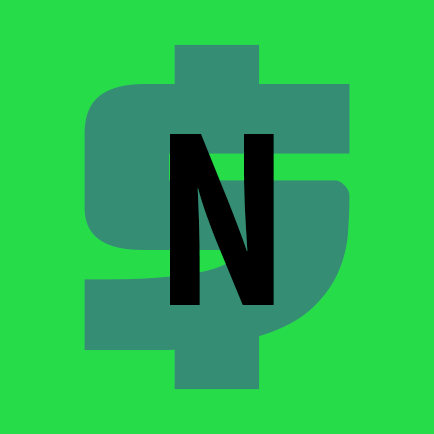
<style>
.page{position:relative;width:434px;height:434px;background:#26dc48}
.page>*{position:absolute;margin:0}
.t1{font:372.1px "Moltors";color:#358e74}
.t2{font:253.7px "MyriadPro-BoldCond";color:#000000}
</style>
<div class="page">
<p class="t1" style="left:84px;top:44px;width:266px;height:346px">$</p>
<p class="t2" style="left:170px;top:134px;width:104px;height:171px">N</p>
</div>
